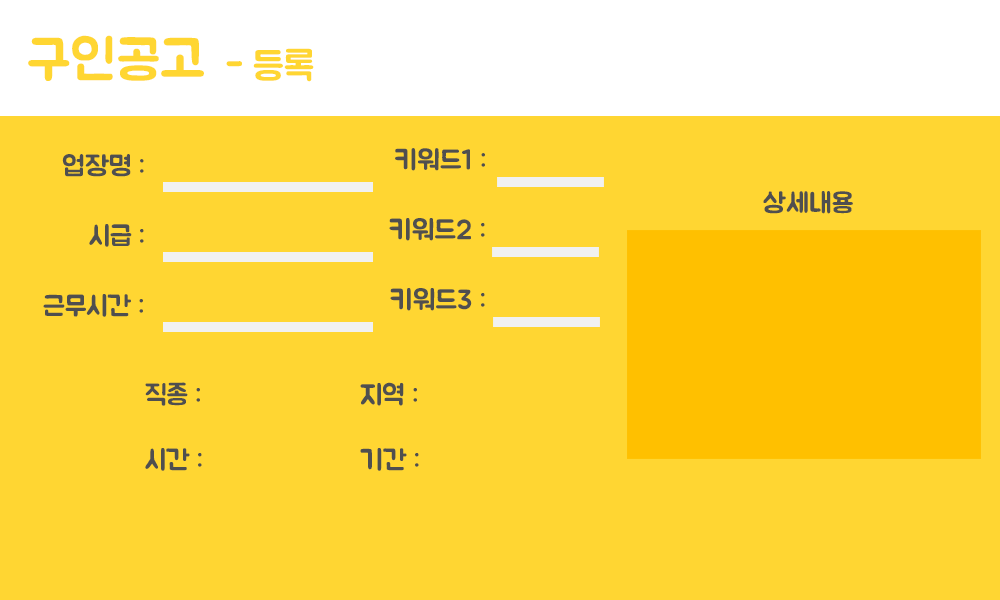
<style>
.page{position:relative;width:1000px;height:600px;background:#ffd632}
.page>*{position:absolute;margin:0}
.t1{font:55.6px "BMJUA";color:#ffd632}
.t2{font:38.9px "BMJUA";color:#ffd632}
.t3{font:27.6px "BMJUA";color:#4f4f4f}
.t4{font:27.8px "BMJUA";color:#4f4f4f}
</style>
<div class="page">
<p class="t1" style="left:28px;top:35px;width:176px;height:46px">구인공고</p>
<p class="t2" style="left:226px;top:48px;width:88px;height:34px">- 등록</p>
<p class="t3" style="left:395px;top:148px;width:90px;height:23px">키워드1 :</p>
<p class="t3" style="left:62px;top:154px;width:82px;height:23px">업장명 :</p>
<p class="t3" style="left:763px;top:191px;width:90px;height:23px">상세내용</p>
<p class="t4" style="left:389px;top:218px;width:96px;height:23px">키워드2 :</p>
<p class="t4" style="left:89px;top:224px;width:55px;height:23px">시급 :</p>
<p class="t4" style="left:43px;top:294px;width:100px;height:23px">근무시간 :</p>
<p class="t4" style="left:390px;top:288px;width:95px;height:23px">키워드3 :</p>
<p class="t4" style="left:145px;top:382px;width:55px;height:24px">직종 :</p>
<p class="t4" style="left:360px;top:382px;width:57px;height:24px">지역 :</p>
<p class="t4" style="left:145px;top:448px;width:57px;height:23px">시간 :</p>
<p class="t4" style="left:360px;top:448px;width:59px;height:23px">기간 :</p>
</div>
